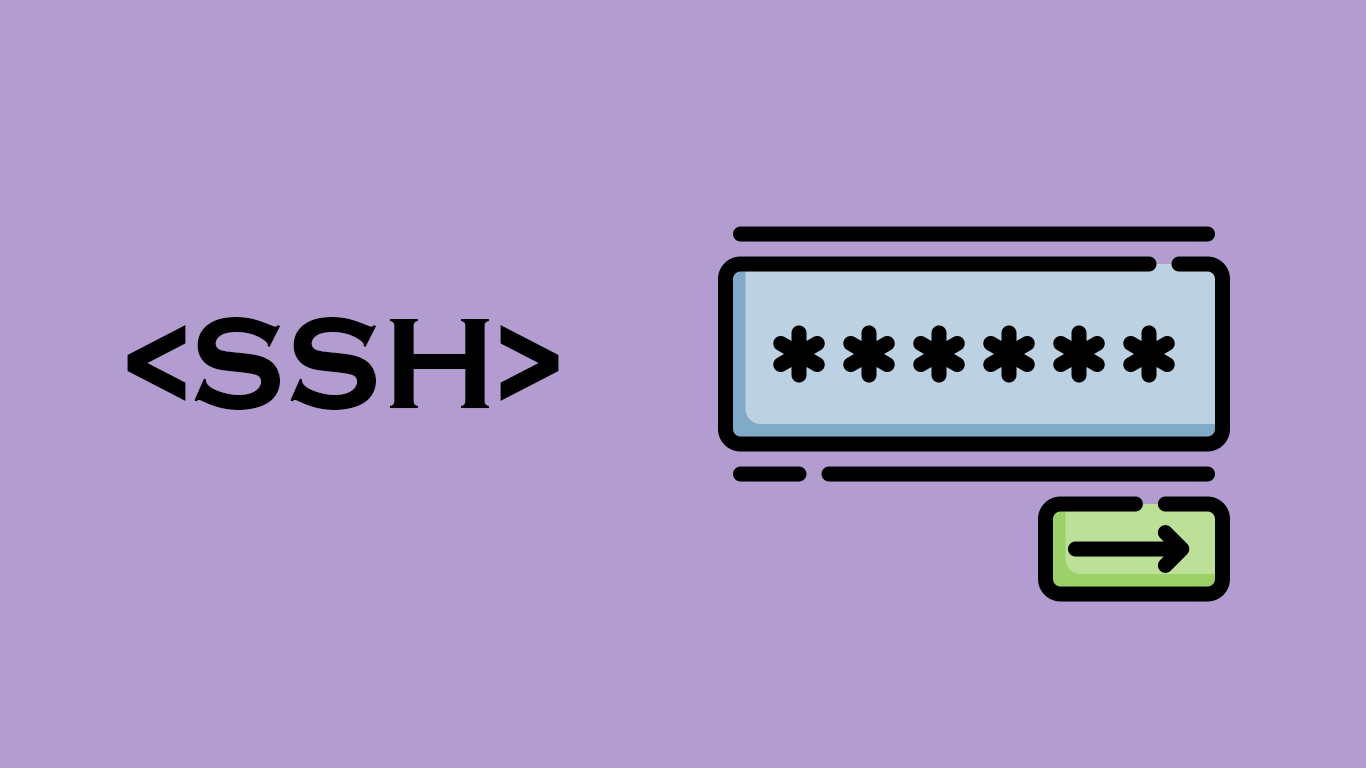
<style>
.page{position:relative;width:1366px;height:768px;background:#b39cd0}
.page>*{position:absolute;margin:0}
.t1{font:133.5px "CopperplateGothic-Bold";color:#000000}
</style>
<div class="page">
<p class="t1" style="left:127px;top:317px;width:432px;height:93px">&lt;SSH&gt;</p>
</div>
